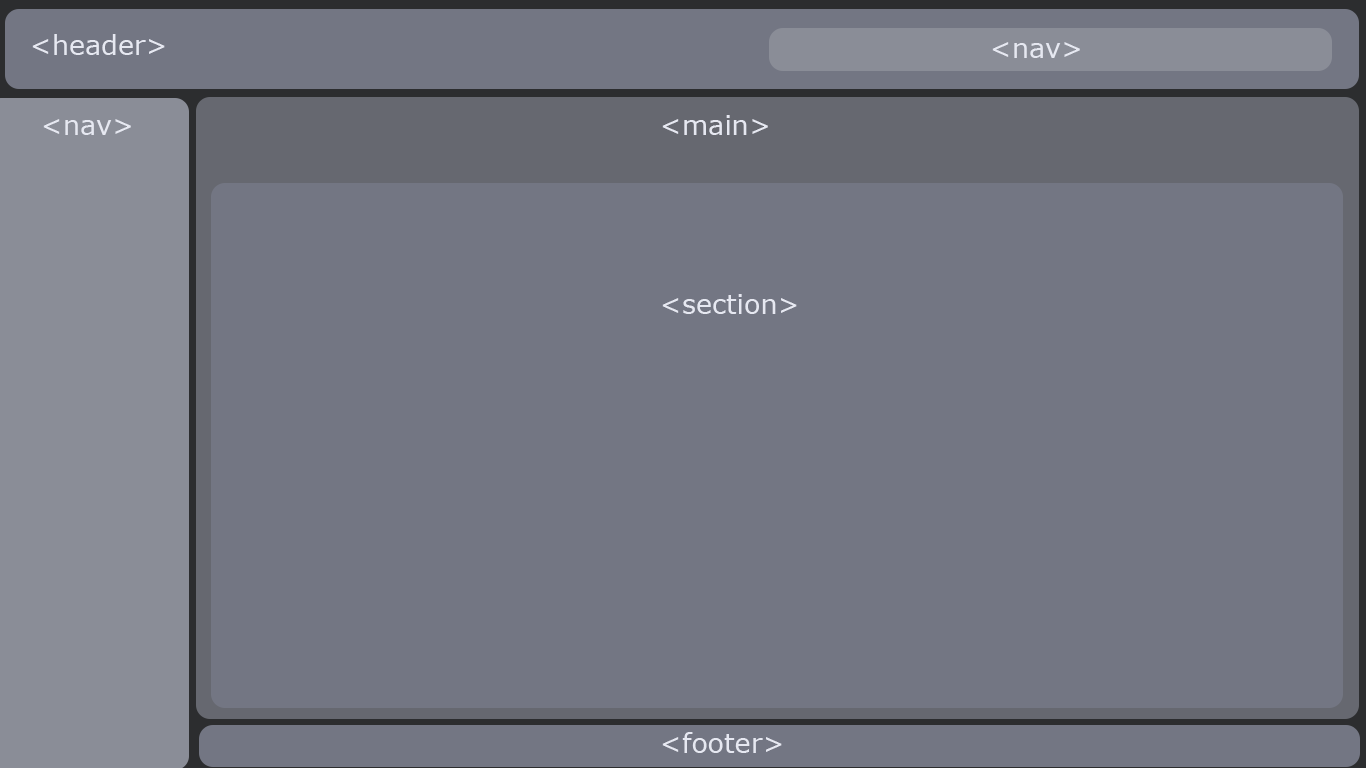
<style>
.page{position:relative;width:1366px;height:768px;background:#737683}
.page>*{position:absolute;margin:0}
.t1{font:27px "Verdana";color:#e6e8f1}
</style>
<div class="page">
<p class="t1" style="left:32px;top:34px;width:133px;height:21px">&lt;header&gt;</p>
<p class="t1" style="left:992px;top:42px;width:88px;height:16px">&lt;nav&gt;</p>
<p class="t1" style="left:43px;top:119px;width:88px;height:16px">&lt;nav&gt;</p>
<p class="t1" style="left:662px;top:115px;width:106px;height:20px">&lt;main&gt;</p>
<p class="t1" style="left:662px;top:294px;width:135px;height:20px">&lt;section&gt;</p>
<p class="t1" style="left:662px;top:732px;width:120px;height:21px">&lt;footer&gt;</p>
</div>
